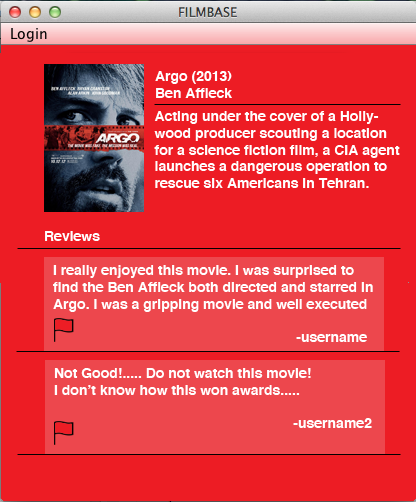
<style>
.page{position:relative;width:416px;height:502px;background:#ed1c24}
.page>*{position:absolute;margin:0}
.t1{font:14px "Helvetica-Bold";color:#ffffff}
</style>
<div class="page">
<p class="t1" style="left:155px;top:71px;width:77px;height:27px">Argo (2013)<br>Ben Affleck</p>
<p class="t1" style="left:154px;top:111px;width:246px;height:77px">Acting under the cover of a Hollywood producer scouting a location for a science fiction film, a CIA agent launches a dangerous operation to rescue six Americans in Tehran. during the U.S. hostage crisis in Iran in 1980.</p>
<p class="t1" style="left:45px;top:231px;width:55px;height:10px">Reviews</p>
<p class="t1" style="left:53px;top:265px;width:320px;height:77px">I really enjoyed this movie. I was surprised to find the Ben Affleck both directed and starred in Argo. I was a gripping movie and well executed<br>      <br>             -username</p>
<p class="t1" style="left:54px;top:368px;width:318px;height:60px">Not Good!..... Do not watch this movie!<br>I don’t know how this won awards.....<br>      <br>            -username2</p>
</div>
